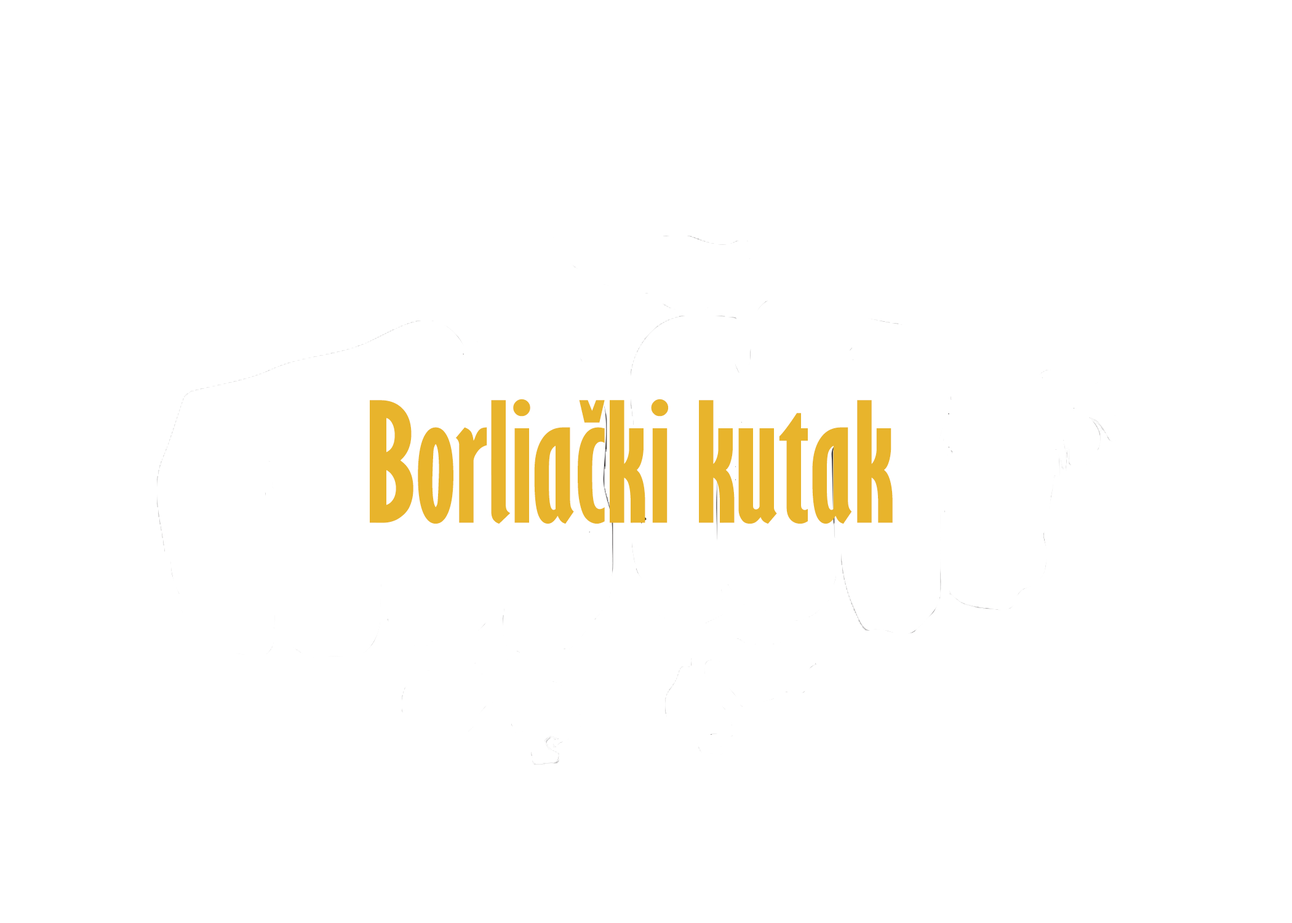
<style>
.page{position:relative;width:1292px;height:923px;background:#ffffff}
.page>*{position:absolute;margin:0}
.t1{font:153.8px "GillSansMT-ExtraCondensedBold";color:#e8b42c}
</style>
<div class="page">
<p class="t1" style="left:370px;top:399px;width:523px;height:125px">Borliački kutak</p>
</div>
